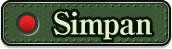
<style>
.page{position:relative;width:172px;height:49px}
.page>*{position:absolute;margin:0}
.t1{font:30px "RyuminPro-ExBold";letter-spacing:-0.04em;color:#eaedc8}
</style>
<div class="page">
<p class="t1" style="left:54px;top:11px;width:98px;height:29px">Simpan</p>
</div>
